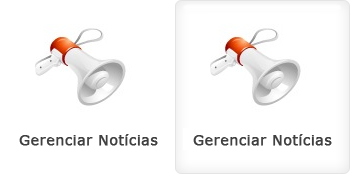
<style>
.page{position:relative;width:350px;height:174px;background:#ffffff}
.page>*{position:absolute;margin:0}
.t1{font:14.4px "Verdana";color:#404040;font-weight:bold}
</style>
<div class="page">
<p class="t1" style="left:19px;top:134px;width:139px;height:12px">Gerenciar Notícias</p>
<p class="t1" style="left:193px;top:134px;width:139px;height:12px">Gerenciar Notícias</p>
</div>
